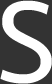
<style>
.page{position:relative;width:52px;height:84px;background:#333333}
.page>*{position:absolute;margin:0}
.t1{font:120px "Seravek";color:#ffffff}
</style>
<div class="page">
<p class="t1" style="left:0px;top:0px;width:52px;height:84px">S</p>
</div>
